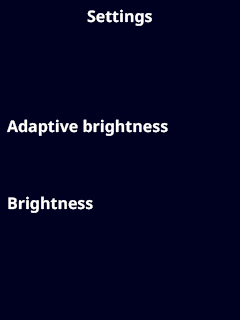
<style>
.page{position:relative;width:240px;height:320px;background:#000020}
.page>*{position:absolute;margin:0}
.t1{font:16px "NotoSans-Bold";color:#ffffff}
</style>
<div class="page">
<p class="t1" style="left:87px;top:9px;width:65px;height:17px">Settings</p>
<p class="t1" style="left:7px;top:119px;width:161px;height:17px">Adaptive brightness</p>
<p class="t1" style="left:8px;top:196px;width:85px;height:17px">Brightness</p>
</div>
